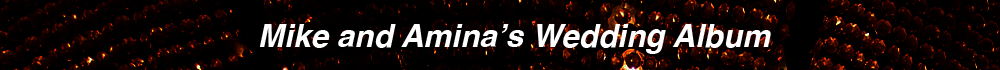
<style>
.page{position:relative;width:1000px;height:70px;background:#000000}
.page>*{position:absolute;margin:0}
.t1{font:31.6px "Helvetica-BoldOblique";color:#ffffff}
</style>
<div class="page">
<p class="t1" style="left:259px;top:24px;width:512px;height:30px">Mike and Amina’s Wedding Album</p>
</div>
